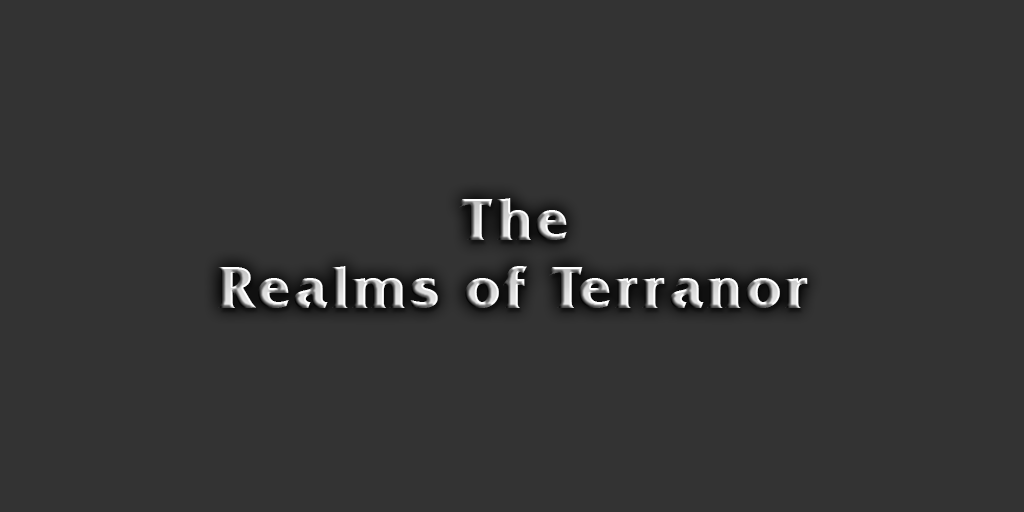
<style>
.page{position:relative;width:1024px;height:512px;background:#333333}
.page>*{position:absolute;margin:0}
.t1{font:60.4px "FrizQuadrataITCbyBT-Bold";letter-spacing:0.05em}
</style>
<div class="page">
<p class="t1" style="left:459px;top:198px;width:108px;height:42px">The</p>
<p class="t1" style="left:218px;top:266px;width:590px;height:42px">Realms of Terranor</p>
</div>
